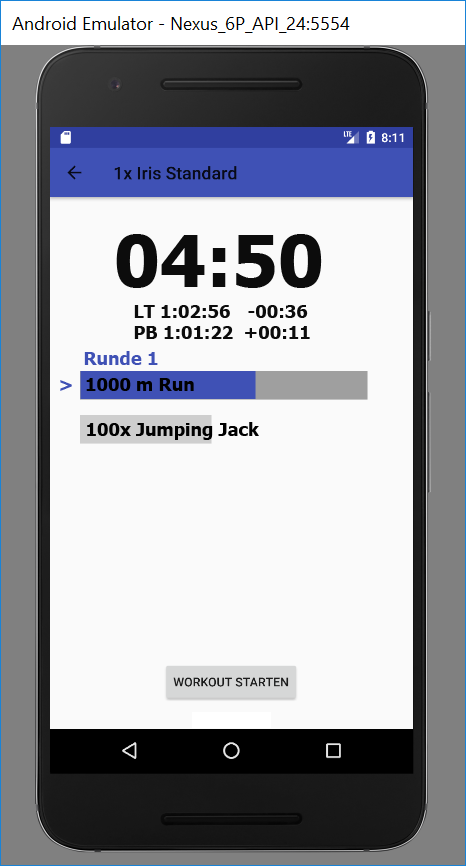
<style>
.page{position:relative;width:466px;height:866px;background:#fafafa}
.page>*{position:absolute;margin:0}
.t1{font:72px "Tahoma-Bold";color:#0c0c0c}
.t2{font:18px "Tahoma-Bold";color:#0c0c0c}
.t3{font:18px "Tahoma-Bold";color:#3f51b5}
.t4{font:18px "Tahoma-Bold";color:#000000}
</style>
<div class="page">
<p class="t1" style="left:116px;top:234px;width:206px;height:54px">04:50</p>
<p class="t2" style="left:134px;top:305px;width:99px;height:34px">LT 1:02:56<br>PB 1:01:22</p>
<p class="t2" style="left:248px;top:305px;width:60px;height:13px">-00:36</p>
<p class="t2" style="left:245px;top:326px;width:65px;height:13px">+00:11</p>
<p class="t3" style="left:84px;top:351px;width:74px;height:14px">Runde 1</p>
<p class="t3" style="left:60px;top:380px;width:12px;height:11px">&gt;</p>
<p class="t4" style="left:86px;top:378px;width:108px;height:13px">1000 m Run</p>
<p class="t4" style="left:87px;top:422px;width:172px;height:18px">100x Jumping Jack</p>
</div>
